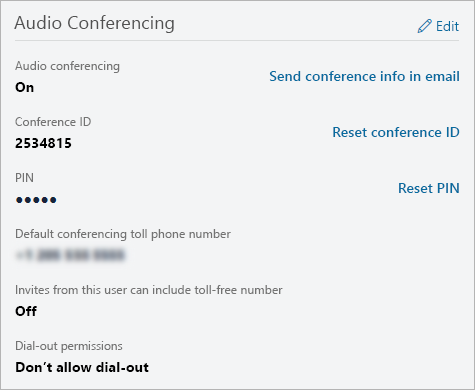
<style>
.page{position:relative;width:475px;height:390px;background:#f3f4f5}
.page>*{position:absolute;margin:0}
.t1{font:18.3px "SegoeUI";color:#505050}
.t2{font:14.2px "SegoeUI-Semilight";color:#076b9f}
.t3{font:12.2px "SegoeUI";color:#737373}
.t4{font:14.2px "SegoeUI-Semibold";color:#076b9f}
.t5{font:14.2px "SegoeUI-Bold";color:#000000}
.t6{font:11.8px "SegoeUI";color:#737373}
</style>
<div class="page">
<p class="t1" style="left:14px;top:15px;width:160px;height:18px">Audio Conferencing</p>
<p class="t2" style="left:437px;top:21px;width:22px;height:10px">Edit</p>
<p class="t3" style="left:15px;top:61px;width:105px;height:12px">Audio conferencing</p>
<p class="t4" style="left:269px;top:71px;width:190px;height:10px">Send conference info in email</p>
<p class="t5" style="left:15px;top:82px;width:19px;height:10px">On</p>
<p class="t3" style="left:15px;top:117px;width:76px;height:9px">Conference ID</p>
<p class="t4" style="left:333px;top:127px;width:127px;height:10px">Reset conference ID</p>
<p class="t5" style="left:15px;top:138px;width:57px;height:10px">2534815</p>
<p class="t3" style="left:16px;top:173px;width:17px;height:9px">PIN</p>
<p class="t4" style="left:399px;top:183px;width:60px;height:10px">Reset PIN</p>
<p class="t3" style="left:16px;top:229px;width:215px;height:12px">Default conferencing toll phone number</p>
<p class="t3" style="left:16px;top:285px;width:267px;height:9px">Invites from this user can include toll-free number</p>
<p class="t5" style="left:15px;top:306px;width:22px;height:10px">Off</p>
<p class="t6" style="left:16px;top:341px;width:107px;height:12px">Dial-out permissions</p>
<p class="t5" style="left:16px;top:362px;width:133px;height:10px">Don’t allow dial-out</p>
</div>
